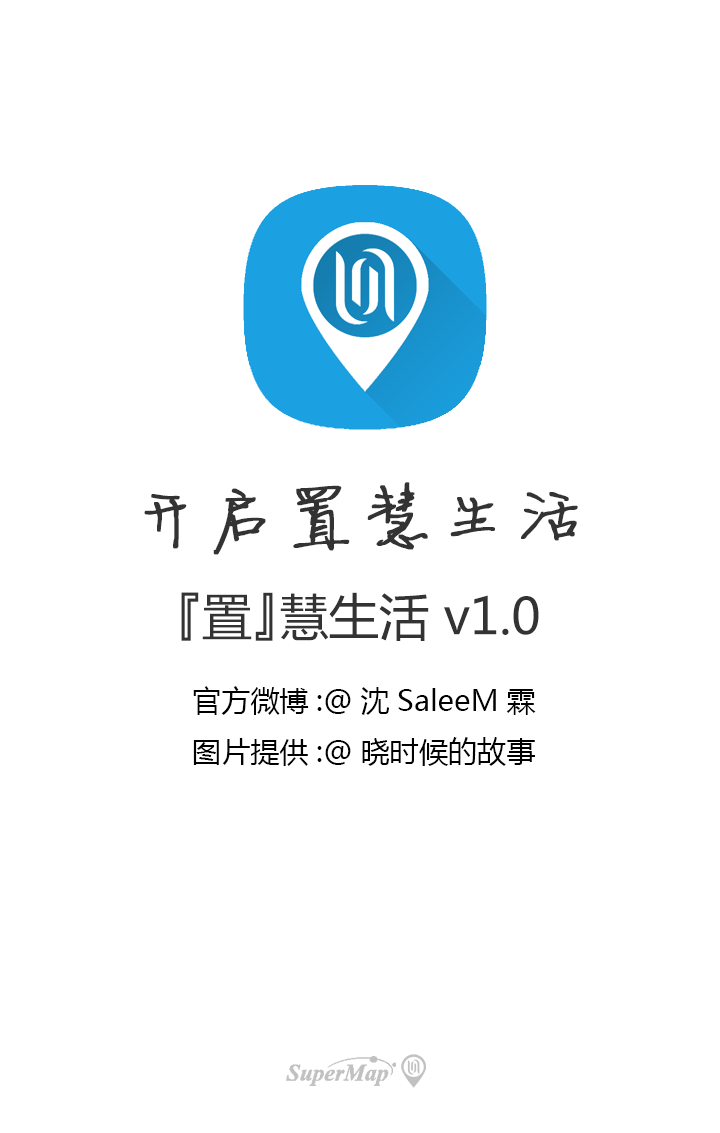
<style>
.page{position:relative;width:720px;height:1133px;background:#ffffff}
.page>*{position:absolute;margin:0}
.t1{font:75px "FZJLJW--GB1-0";color:#333333;font-weight:bold}
.t2{font:50.3px "MicrosoftYaHei";color:#333333}
.t3{font:50.1px "MicrosoftYaHei";color:#333333}
.t4{font:29.2px "MicrosoftYaHei";color:#000000}
</style>
<div class="page">
<p class="t1" style="left:144px;top:482px;width:434px;height:73px">开启置慧生活</p>
<p class="t2" style="left:181px;top:592px;width:92px;height:49px">『置』</p>
<p class="t3" style="left:280px;top:592px;width:259px;height:49px">慧生活 v1.0</p>
<p class="t4" style="left:193px;top:686px;width:343px;height:80px">官方微博:@沈SaleeM霖<br>图片提供:@晓时候的故事</p>
</div>
